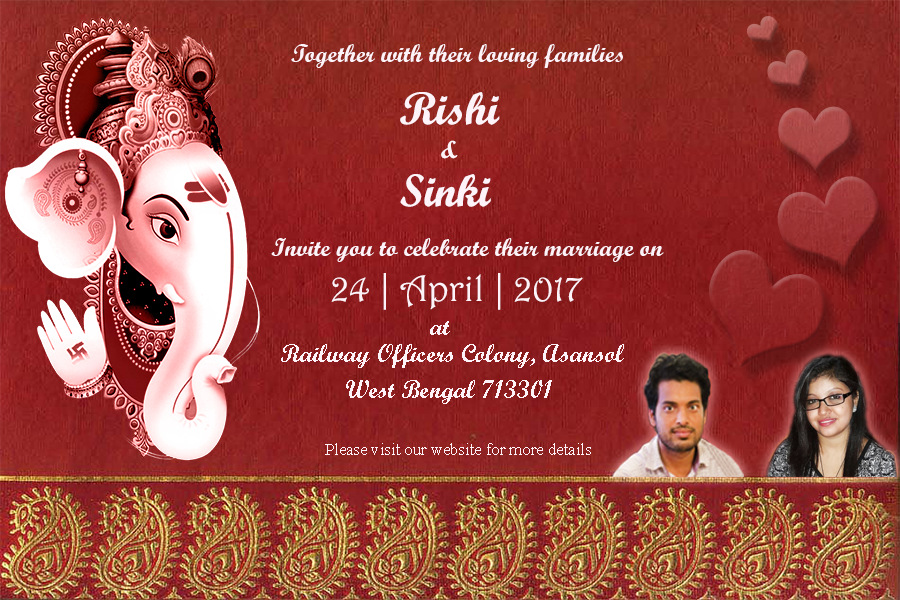
<style>
.page{position:relative;width:900px;height:600px}
.page>*{position:absolute;margin:0}
.t1{font:25px "ScriptMTBold";color:#fef3f8}
.t2{font:45.8px "ScriptMTBold";color:#fef3f8}
.t3{font:37.5px "Harrington";color:#fef3f8}
.t4{font:16.7px "TimesNewRomanPSMT";color:#fef3f8}
</style>
<div class="page">
<p class="t1" style="left:291px;top:44px;width:332px;height:24px">Together with their loving families</p>
<p class="t2" style="left:400px;top:92px;width:100px;height:33px">Rishi</p>
<p class="t1" style="left:441px;top:140px;width:17px;height:19px">&amp;</p>
<p class="t2" style="left:400px;top:174px;width:91px;height:33px">Sinki</p>
<p class="t1" style="left:271px;top:238px;width:393px;height:24px">Invite you to celebrate their marriage on</p>
<p class="t3" style="left:331px;top:273px;width:252px;height:37px">24 | April | 2017</p>
<p class="t1" style="left:430px;top:321px;width:20px;height:14px">at</p>
<p class="t1" style="left:281px;top:344px;width:343px;height:24px">Railway Officers Colony, Asansol</p>
<p class="t1" style="left:346px;top:380px;width:206px;height:24px">West Bengal 713301</p>
<p class="t4" style="left:325px;top:443px;width:266px;height:12px">Please visit our website for more details</p>
</div>
